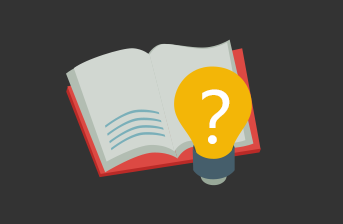
<style>
.page{position:relative;width:343px;height:224px;background:#333333}
.page>*{position:absolute;margin:0}
.t1{font:69.8px "MicrosoftYaHei";letter-spacing:0.1em;color:#ffffff}
</style>
<div class="page">
<p class="t1" style="left:202px;top:89px;width:28px;height:55px">？</p>
</div>
